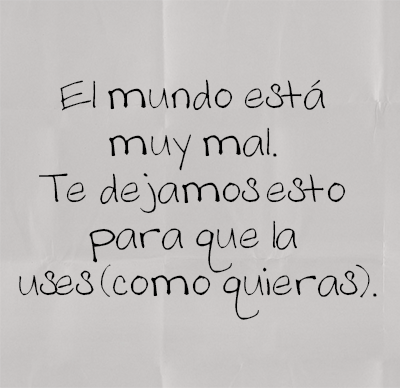
<style>
.page{position:relative;width:400px;height:388px}
.page>*{position:absolute;margin:0}
.t1{font:39px "ASMelanieHandwritting";color:#000000}
</style>
<div class="page">
<p class="t1" style="left:19px;top:79px;width:358px;height:241px;text-align:center">El mundo está <br>muy mal. <br>Te dejamos esto <br>para que la <br>uses (como quieras).</p>
</div>
